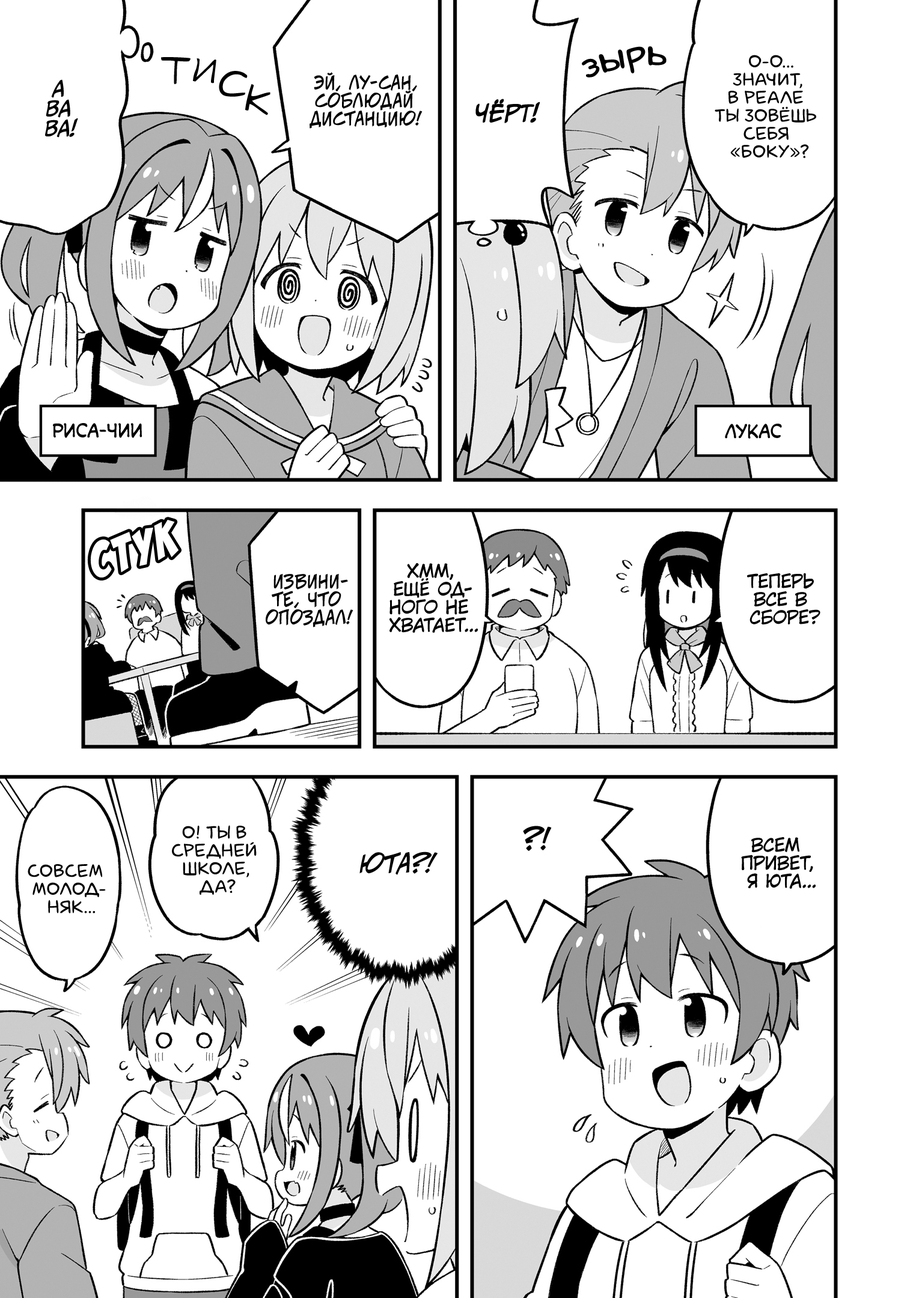
<style>
.page{position:relative;width:919px;height:1298px;background:#ffffff}
.page>*{position:absolute;margin:0}
.t1{font:36.1px "laCartoonerie";color:#000000}
.t2{font:36.1px "v_Augie";color:#000000;text-transform:uppercase}
.t3{font:18px "laCartoonerie";color:#000000;text-transform:uppercase}
.t4{font:18px "v_CCJeffCampbell";color:#000000;text-transform:uppercase}
.t5{font:19.8px "CCMeanwhile";color:#000000;text-transform:uppercase;font-style:italic}
.t6{font:21.6px "CCMeanwhile";color:#000000;text-transform:uppercase;font-weight:bold;font-style:italic}
.t7{font:18px "v_CCMonologous";color:#000000;text-transform:uppercase}
.t8{font:54.1px "BadaBoom";color:#ffffff;text-transform:uppercase}
.t9{font:18px "KuraiVoice2";color:#000000;text-transform:uppercase}
.t10{font:28.8px "v_CCJeffCampbell";color:#000000;text-transform:uppercase}
.t11{font:25.2px "v_CCJeffCampbell";color:#000000;text-transform:uppercase;font-style:italic}
</style>
<div class="page">
<p class="t1" style="left:582px;top:46px;width:84px;height:32px;rotate:-10deg">зырь</p>
<p class="t2" style="left:161px;top:57px;width:29px;height:27px;rotate:7deg">т</p>
<p class="t2" style="left:193px;top:58px;width:23px;height:26px;rotate:10deg">и</p>
<p class="t3" style="left:714px;top:55px;width:102px;height:103px;text-align:center">О-о...<br>Значит,<br>в реале<br>ты зовёшь<br>себя<br>«боку»?</p>
<p class="t2" style="left:219px;top:71px;width:29px;height:26px;rotate:7deg">с</p>
<p class="t4" style="left:309px;top:72px;width:113px;height:57px;text-align:center">Эй, Лу-сан,<br>соблюдай<br>дистанцию!</p>
<p class="t5" style="left:45px;top:79px;width:33px;height:59px;text-align:center">А<br>ва<br>ва!</p>
<p class="t2" style="left:245px;top:84px;width:25px;height:31px;rotate:12deg">к</p>
<p class="t6" style="left:475px;top:99px;width:65px;height:24px">Чёрт!</p>
<p class="t7" style="left:53px;top:423px;width:89px;height:15px">Риса-чии</p>
<p class="t7" style="left:725px;top:424px;width:57px;height:15px">Лукас</p>
<p class="t8" style="left:90px;top:520px;width:89px;height:57px;rotate:-17deg">стук</p>
<p class="t9" style="left:389px;top:563px;width:89px;height:70px;text-align:center">Хмм,<br>ещё од-<br>ного не<br>хватает...</p>
<p class="t4" style="left:266px;top:574px;width:87px;height:53px;text-align:center">Извини-<br>те, что<br>опоздал!</p>
<p class="t9" style="left:747px;top:573px;width:73px;height:52px;text-align:center">Теперь<br>все в<br>сборе?</p>
<p class="t3" style="left:172px;top:825px;width:85px;height:70px;text-align:center">О! Ты в<br>средней<br>школе,<br>да?</p>
<p class="t10" style="left:523px;top:826px;width:29px;height:25px">?!</p>
<p class="t9" style="left:741px;top:837px;width:74px;height:52px;text-align:center">Всем<br>привет,<br>я Юта...</p>
<p class="t11" style="left:359px;top:851px;width:78px;height:24px">Юта?!</p>
<p class="t3" style="left:28px;top:864px;width:78px;height:49px;text-align:center">Совсем<br>молод-<br>няк...</p>
</div>
